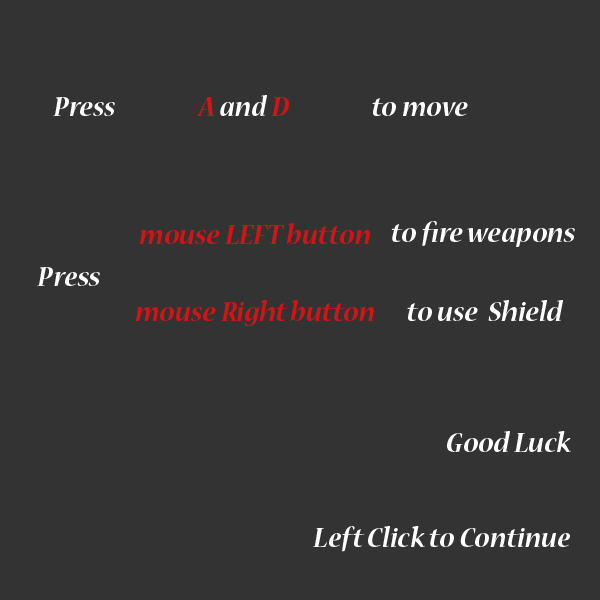
<style>
.page{position:relative;width:600px;height:600px;background:#333333}
.page>*{position:absolute;margin:0}
.t1{font:30px "NuevaStd-BoldItalic";color:#ffffff}
.t2{font:30px "NuevaStd-BoldItalic";color:#d21414}
</style>
<div class="page">
<p class="t1" style="left:53px;top:97px;width:62px;height:19px">Press</p>
<p class="t1" style="left:197px;top:95px;width:92px;height:21px"><span class="t2">A</span> and <span class="t2">D</span></p>
<p class="t1" style="left:372px;top:98px;width:96px;height:18px">to move</p>
<p class="t1" style="left:391px;top:221px;width:184px;height:26px">to fire weapons</p>
<p class="t2" style="left:140px;top:223px;width:230px;height:21px">mouse LEFT button</p>
<p class="t1" style="left:37px;top:267px;width:63px;height:19px">Press</p>
<p class="t2" style="left:136px;top:300px;width:238px;height:26px">mouse Right button</p>
<p class="t1" style="left:407px;top:300px;width:156px;height:21px">to use  Shield</p>
<p class="t1" style="left:447px;top:431px;width:124px;height:21px">Good Luck</p>
<p class="t1" style="left:313px;top:526px;width:257px;height:26px">Left Click to Continue</p>
</div>
